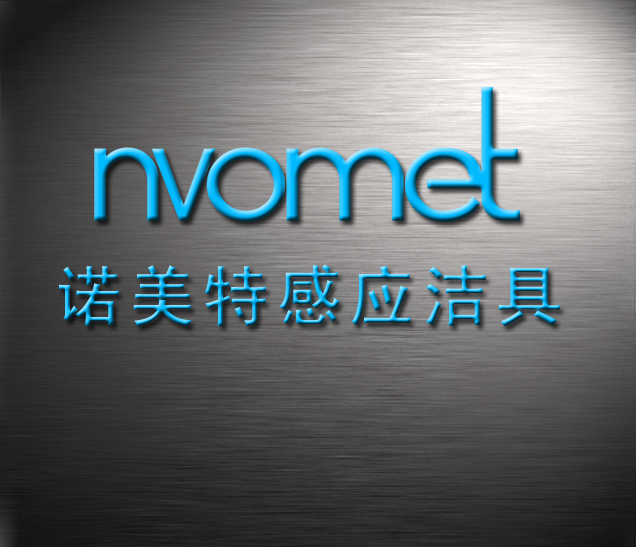
<style>
.page{position:relative;width:637px;height:547px}
.page>*{position:absolute;margin:0}
.t1{font:66.7px "SimHei";letter-spacing:0.1em}
</style>
<div class="page">
<p class="t1" style="left:59px;top:264px;width:501px;height:63px">诺美特感应洁具</p>
</div>
